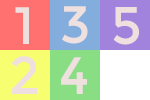
<style>
.page{position:relative;width:150px;height:100px}
.page>*{position:absolute;margin:0}
.t1{font:52.7px "Montserrat-Regular";color:#efe0e0}
</style>
<div class="page">
<p class="t1" style="left:62px;top:6px;width:26px;height:38px">3</p>
<p class="t1" style="left:15px;top:7px;width:14px;height:37px">1</p>
<p class="t1" style="left:113px;top:7px;width:26px;height:38px">5</p>
<p class="t1" style="left:11px;top:56px;width:27px;height:38px">2</p>
<p class="t1" style="left:61px;top:57px;width:26px;height:37px">4</p>
</div>
